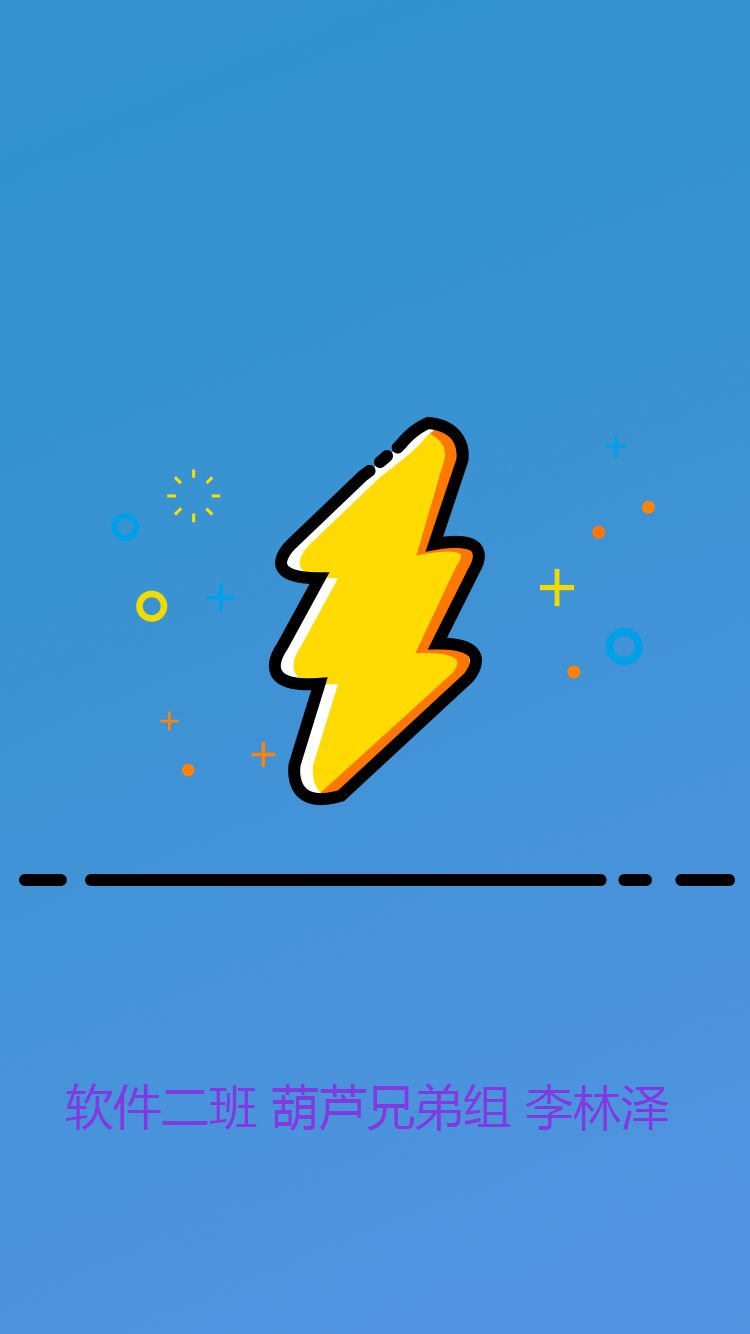
<style>
.page{position:relative;width:750px;height:1334px}
.page>*{position:absolute;margin:0}
.t1{font:48px "MicrosoftYaHei";color:#803ae0}
</style>
<div class="page">
<p class="t1" style="left:65px;top:1083px;width:604px;height:48px">软件二班 葫芦兄弟组 李林泽</p>
</div>
